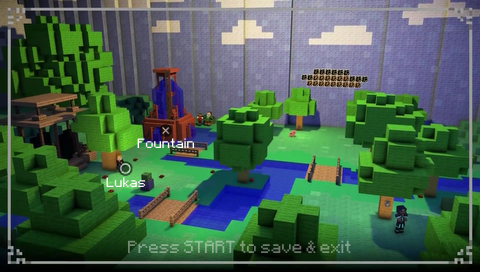
<style>
.page{position:relative;width:480px;height:272px}
.page>*{position:absolute;margin:0}
.t1{font:11px "Minecraft";color:#ffffff}
.t2{font:14px "Minecraft"}
</style>
<div class="page">
<p class="t1" style="left:137px;top:138px;width:57px;height:10px">Fountain</p>
<p class="t1" style="left:106px;top:177px;width:40px;height:10px">Lukas</p>
<p class="t2" style="left:128px;top:240px;width:223px;height:13px">Press START to save &amp; exit</p>
</div>
